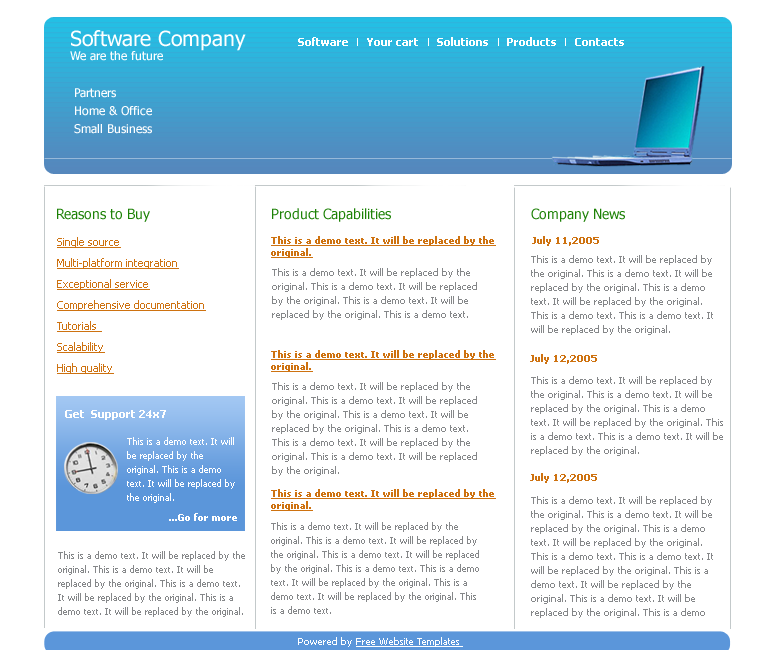
<style>
.page{position:relative;width:780px;height:650px;background:#ffffff}
.page>*{position:absolute;margin:0}
.t1{font:12px/14px "Tahoma";color:#ffffff}
.t2{font:21px/14px "Tahoma";color:#ffffff}
.t3{font:11px "Tahoma-Bold";color:#ffffff}
.t4{font:12px/18px "Tahoma";color:#ffffff}
.t5{font:14px "Tahoma";color:#1c8105}
.t6{font:11px/21px "Tahoma";color:#ce7210;text-decoration:underline}
.t7{font:9px/12px "Tahoma-Bold";color:#ce7210;text-decoration:underline}
.t8{font:10px "Tahoma-Bold";color:#ce7210}
.t9{font:10px/14px "Tahoma";color:#858789}
.t10{font:9px/14px "Tahoma";color:#ffffff}
.t11{font:9px "Tahoma-Bold";color:#ffffff}
.t12{font:9px/14px "Tahoma";color:#858789}
.t13{font:10px "Tahoma";color:#ffffff;text-decoration:underline}
.t14{font:10px "Tahoma";color:#ffffff}
</style>
<div class="page">
<p class="t1" style="left:70px;top:30px;width:176px;height:31px"><span class="t2">Software Company<br></span>We are the future</p>
<p class="t3" style="left:298px;top:37px;width:326px;height:9px">Software      Your cart      Solutions      Products      Contacts</p>
<p class="t4" style="left:74px;top:88px;width:78px;height:46px">Partners<br>Home &amp; Office<br>Small Business</p>
<p class="t5" style="left:57px;top:208px;width:93px;height:14px">Reasons to Buy</p>
<p class="t5" style="left:272px;top:208px;width:119px;height:14px">Product Capabilities</p>
<p class="t5" style="left:531px;top:208px;width:94px;height:14px">Company News</p>
<p class="t6" style="left:57px;top:237px;width:149px;height:137px">Single source<br>Multi-platform integration<br>Exceptional service<br>Comprehensive documentation<br>Tutorials <br>Scalability<br>High quality</p>
<p class="t7" style="left:271px;top:236px;width:225px;height:22px">This is a demo text. It will be replaced by the original.</p>
<p class="t8" style="left:532px;top:236px;width:67px;height:10px">July 11,2005</p>
<p class="t9" style="left:531px;top:255px;width:182px;height:80px">This is a demo text. It will be replaced by the original. This is a demo text. It will be replaced by the original. This is a demo text. It will be replaced by the original. This is a demo text. This is a demo text. It will be replaced by the original.</p>
<p class="t9" style="left:272px;top:268px;width:205px;height:52px">This is a demo text. It will be replaced by the original. This is a demo text. It will be replaced by the original. This is a demo text. It will be replaced by the original. This is a demo text.</p>
<p class="t7" style="left:271px;top:350px;width:225px;height:22px">This is a demo text. It will be replaced by the original.</p>
<p class="t8" style="left:530px;top:354px;width:67px;height:10px">July 12,2005</p>
<p class="t9" style="left:531px;top:376px;width:192px;height:80px">This is a demo text. It will be replaced by the original. This is a demo text. It will be replaced by the original. This is a demo text. It will be replaced by the original. This is a demo text. This is a demo text. It will be replaced by the original.</p>
<p class="t9" style="left:272px;top:382px;width:205px;height:94px">This is a demo text. It will be replaced by the original. This is a demo text. It will be replaced by the original. This is a demo text. It will be replaced by the original. This is a demo text. This is a demo text. It will be replaced by the original. This is a demo text. It will be replaced by the original.</p>
<p class="t3" style="left:65px;top:410px;width:101px;height:10px">Get  Support 24x7</p>
<p class="t10" style="left:127px;top:437px;width:108px;height:66px">This is a demo text. It will be replaced by the original. This is a demo text. It will be replaced by the original.</p>
<p class="t8" style="left:530px;top:473px;width:67px;height:10px">July 12,2005</p>
<p class="t7" style="left:271px;top:489px;width:225px;height:22px">This is a demo text. It will be replaced by the original.</p>
<p class="t9" style="left:531px;top:496px;width:182px;height:122px">This is a demo text. It will be replaced by the original. This is a demo text. It will be replaced by the original. This is a demo text. It will be replaced by the original. This is a demo text. This is a demo text. It will be replaced by the original. This is a demo text. It will be replaced by the original. This is a demo text. It will be replaced by the original. This is a demo text. It will be replaced by the original.</p>
<p class="t11" style="left:169px;top:513px;width:68px;height:8px">...Go for more</p>
<p class="t12" style="left:271px;top:522px;width:208px;height:92px">This is a demo text. It will be replaced by the original. This is a demo text. It will be replaced by the original. This is a demo text. It will be replaced by the original. This is a demo text. This is a demo text. It will be replaced by the original. This is a demo text. It will be replaced by the original. This is a demo text.</p>
<p class="t12" style="left:58px;top:551px;width:187px;height:66px">This is a demo text. It will be replaced by the original. This is a demo text. It will be replaced by the original. This is a demo text. It will be replaced by the original. This is a demo text. It will be replaced by the original.</p>
<p class="t13" style="left:298px;top:637px;width:165px;height:10px"><span class="t14">Powered by </span>Free Website Templates</p>
</div>
